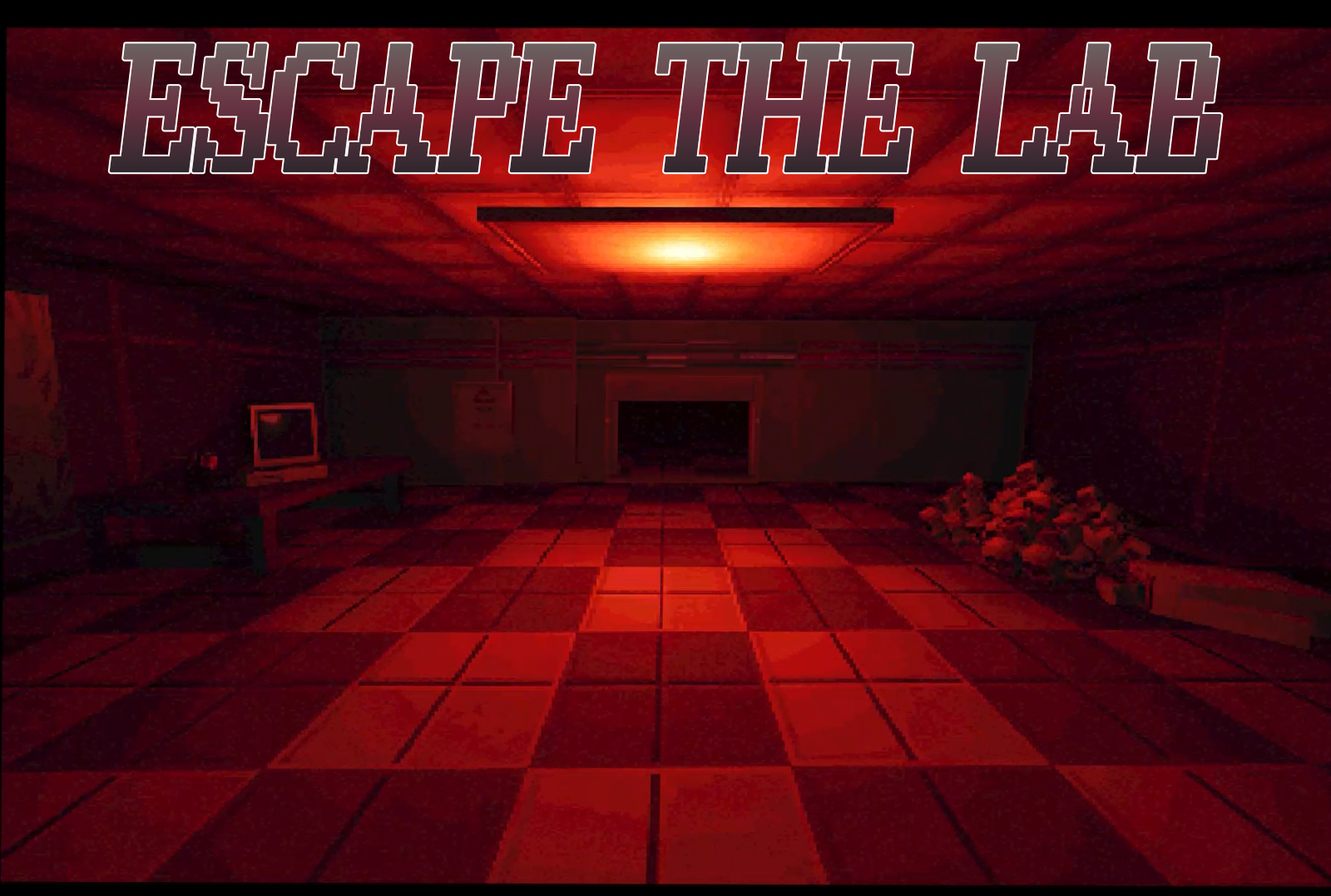
<style>
.page{position:relative;width:1331px;height:896px}
.page>*{position:absolute;margin:0}
.t1{font:225.6px "RetroByte";font-weight:bold;font-style:italic;scale:0.69 1}
</style>
<div class="page">
<p class="t1" style="left:109px;top:43px;width:1113px;height:130px">ESCAPE THE LAB</p>
</div>
